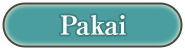
<style>
.page{position:relative;width:185px;height:50px;background:#4a9e9f}
.page>*{position:absolute;margin:0}
.t1{font:26px "RyuminPro-ExBold";letter-spacing:-0.04em;color:#ffffff}
</style>
<div class="page">
<p class="t1" style="left:60px;top:15px;width:66px;height:20px">Pakai</p>
</div>
